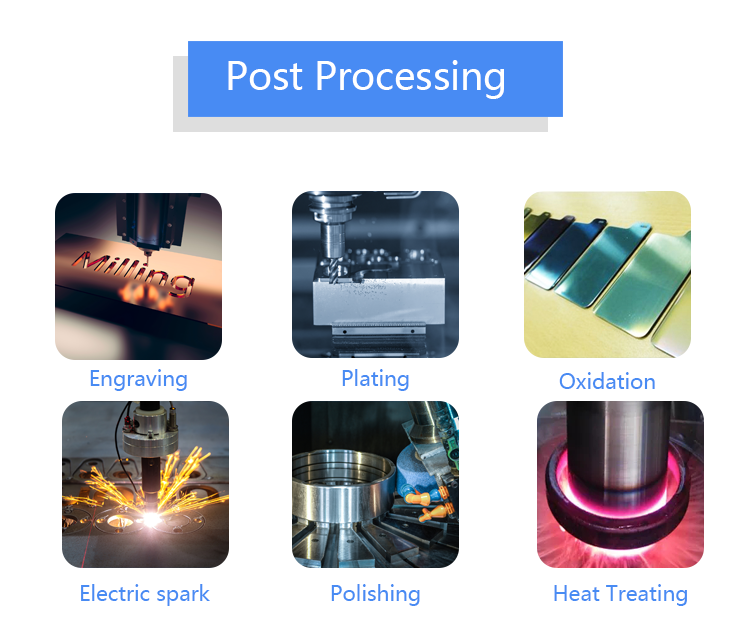
<style>
.page{position:relative;width:750px;height:622px;background:#ffffff}
.page>*{position:absolute;margin:0}
.t1{font:37.5px "MicrosoftYaHei";color:#ffffff}
.t2{font:20.8px "MicrosoftYaHei";color:#488bf3}
</style>
<div class="page">
<p class="t1" style="left:228px;top:60px;width:276px;height:39px">Post Processing</p>
<p class="t2" style="left:90px;top:369px;width:97px;height:22px">Engraving</p>
<p class="t2" style="left:342px;top:369px;width:67px;height:22px">Plating</p>
<p class="t2" style="left:559px;top:372px;width:96px;height:17px">Oxidation</p>
<p class="t2" style="left:81px;top:584px;width:129px;height:22px">Electric spark</p>
<p class="t2" style="left:331px;top:584px;width:89px;height:22px">Polishing</p>
<p class="t2" style="left:554px;top:584px;width:133px;height:22px">Heat Treating</p>
</div>
